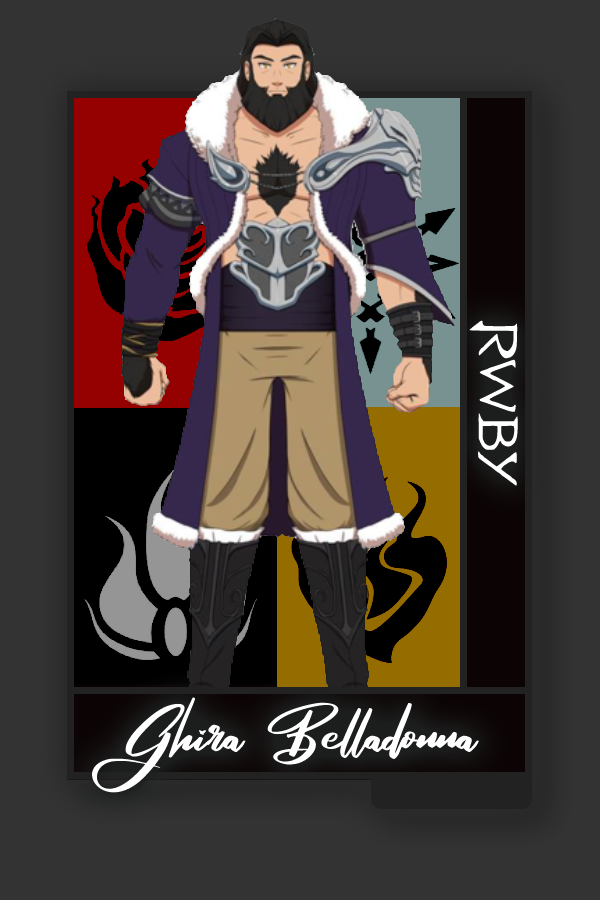
<style>
.page{position:relative;width:600px;height:900px;background:#333333}
.page>*{position:absolute;margin:0}
.t1{font:61.3px "RWBY_Style";color:#ffffff;scale:1.25 1}
.t2{font:75px "RosegaFREE";color:#ffffff}
</style>
<div class="page">
<p class="t1" style="left:469px;top:320px;width:49px;height:166px;rotate:90deg">RWBY</p>
<p class="t2" style="left:73px;top:697px;width:406px;height:116px">Ghira Belladonna</p>
</div>
